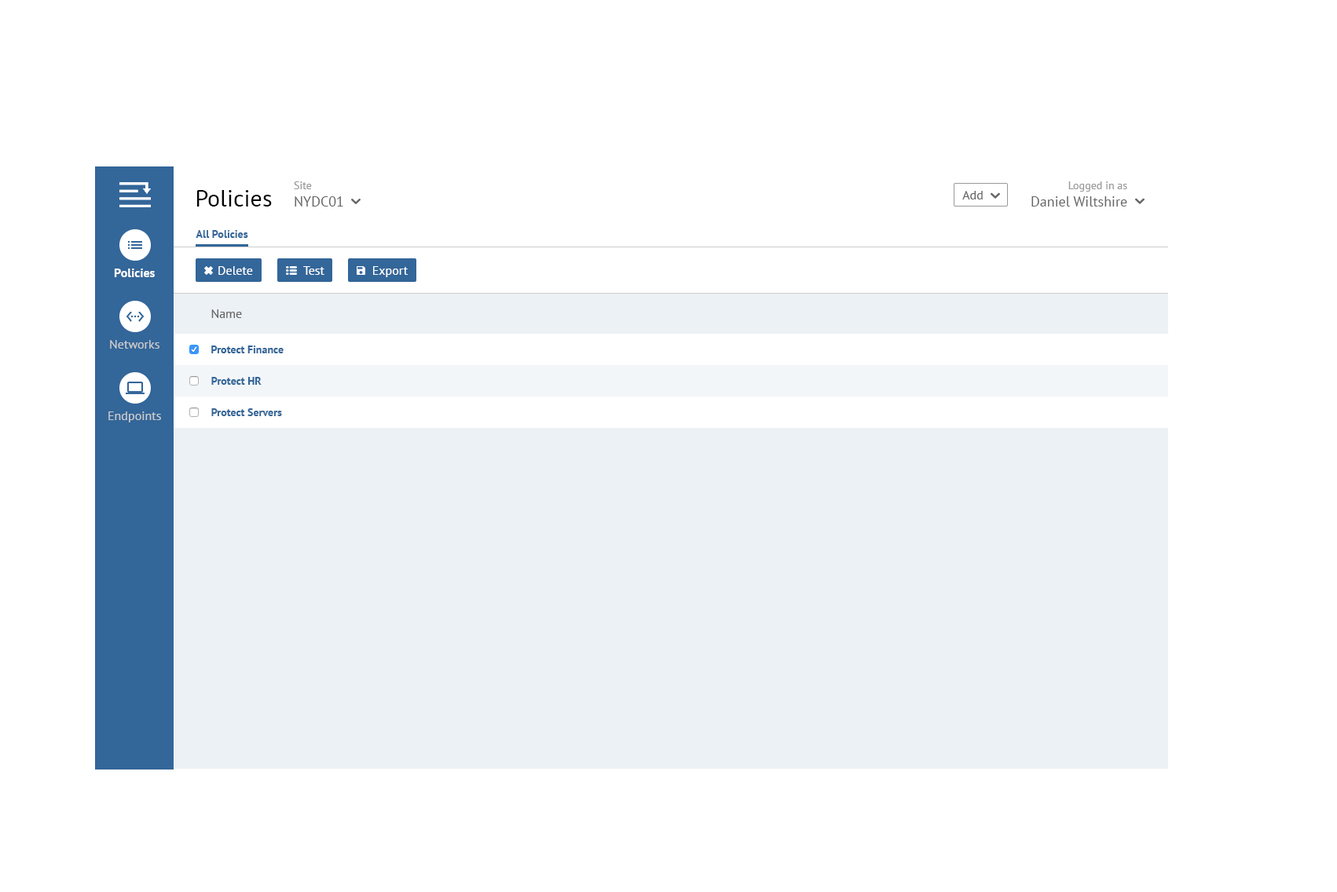
<style>
.page{position:relative;width:1337px;height:892px;background:#ffffff}
.page>*{position:absolute;margin:0}
.t1{font:14.1px "PTSans-Regular";color:#666666}
.t2{font:11px "PTSans-Regular";color:#999999}
.t3{font:14.3px "PTSans-Regular";color:#666666}
.t4{font:11.1px "PTSans-Regular";color:#999999}
.t5{font:23.6px "PTSans-Regular";color:#000000}
.t6{font:12.6px "PTSans-Regular";color:#666666}
.t7{font:10.9px "PTSans-Bold";color:#336699}
.t8{font:12.6px "PTSans-Bold";color:#ffffff}
.t9{font:12.6px "PTSans-Regular";color:#ffffff}
.t10{font:12.6px "PTSans-Regular";color:#cccccc}
.t11{font:11px "PTSans-Bold";color:#336699}
</style>
<div class="page">
<p class="t1" style="left:294px;top:181px;width:49px;height:26px"><span class="t2">Site<br></span>NYDC01</p>
<p class="t3" style="left:1031px;top:181px;width:96px;height:26px;text-align:right"><span class="t4">Logged in as<br></span>Daniel Wiltshire</p>
<p class="t5" style="left:197px;top:190px;width:75px;height:17px">Policies</p>
<p class="t6" style="left:962px;top:191px;width:20px;height:8px">Add</p>
<p class="t7" style="left:196px;top:230px;width:52px;height:8px">All Policies</p>
<p class="t8" style="left:114px;top:269px;width:41px;height:8px">Policies</p>
<p class="t9" style="left:218px;top:266px;width:35px;height:9px">Delete</p>
<p class="t9" style="left:303px;top:266px;width:21px;height:9px">Test</p>
<p class="t9" style="left:373px;top:266px;width:35px;height:11px">Export</p>
<p class="t6" style="left:211px;top:309px;width:31px;height:9px">Name</p>
<p class="t10" style="left:110px;top:340px;width:49px;height:9px">Networks</p>
<p class="t11" style="left:211px;top:346px;width:73px;height:7px">Protect Finance</p>
<p class="t11" style="left:211px;top:377px;width:51px;height:8px">Protect HR</p>
<p class="t10" style="left:108px;top:412px;width:53px;height:11px">Endpoints</p>
<p class="t11" style="left:211px;top:408px;width:71px;height:8px">Protect Servers</p>
</div>
